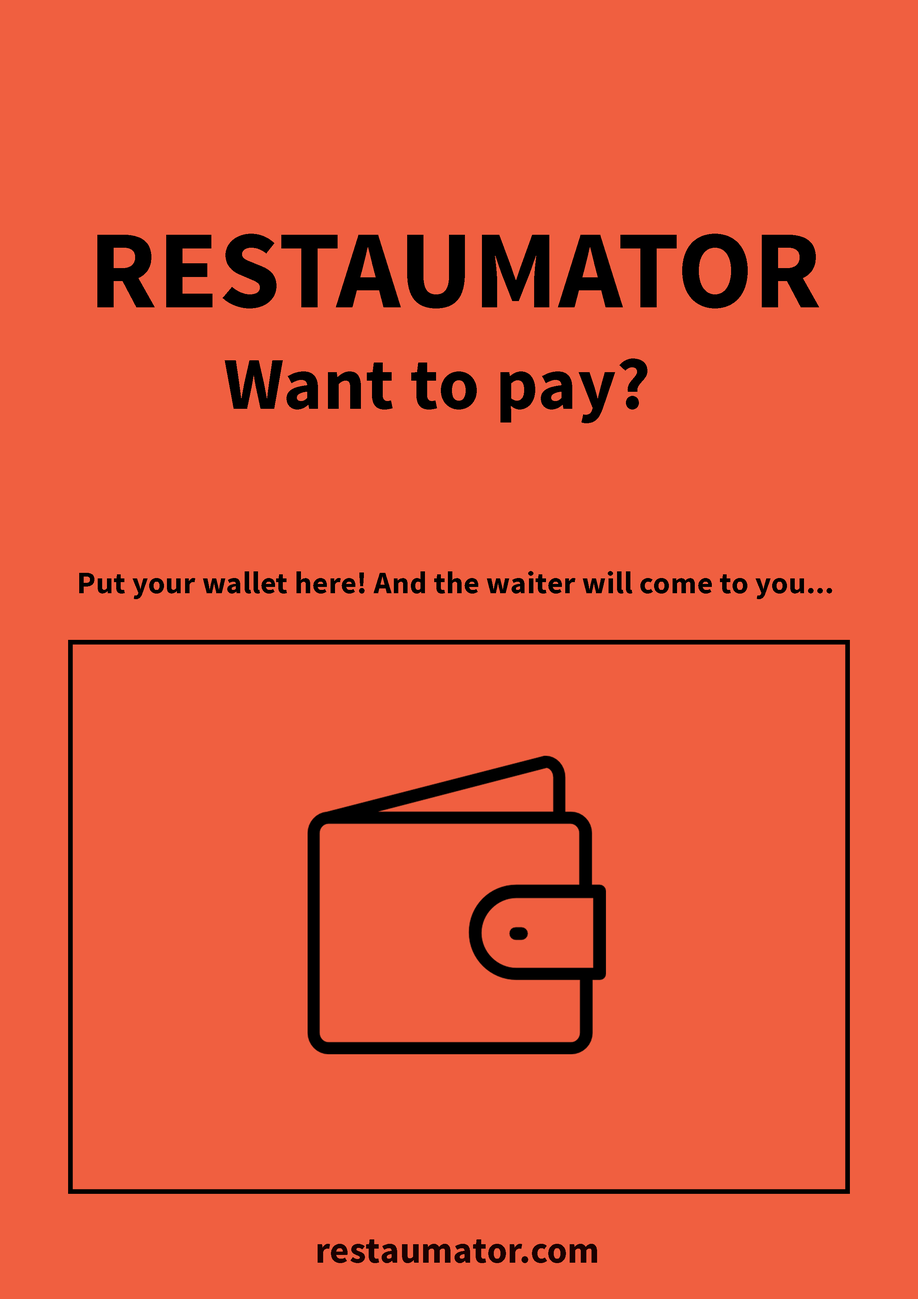
<style>
.page{position:relative;width:918px;height:1299px;background:#f05f40}
.page>*{position:absolute;margin:0}
.t1{font:111.1px "SourceSansPro-Bold";letter-spacing:0.005em;color:#000000}
.t2{font:74px "SourceSansPro-Bold";letter-spacing:0.005em;color:#000000}
.t3{font:30.9px "SourceSansPro-Bold";letter-spacing:0.005em;color:#000000}
.t4{font:37px "SourceSansPro-Bold";letter-spacing:0.005em;color:#1c0000}
</style>
<div class="page">
<p class="t1" style="left:97px;top:234px;width:722px;height:74px">RESTAUMATOR</p>
<p class="t2" style="left:225px;top:358px;width:423px;height:65px">Want to pay?</p>
<p class="t3" style="left:79px;top:571px;width:753px;height:28px">Put your wallet here! And the waiter will come to you...</p>
<p class="t4" style="left:318px;top:1239px;width:279px;height:24px">restaumator.com</p>
</div>
